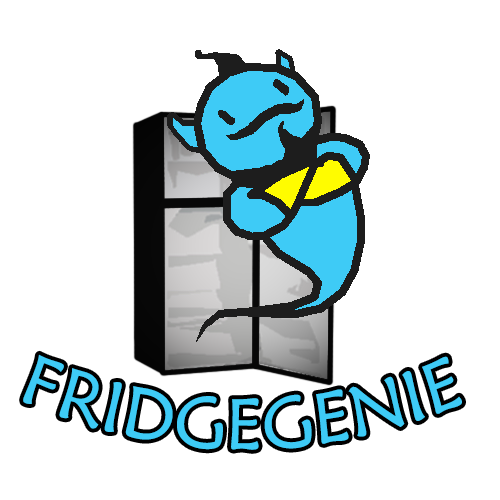
<style>
.page{position:relative;width:500px;height:500px;background:#ffffff}
.page>*{position:absolute;margin:0}
.t1{font:72px "MaiandraGD-Regular";color:#3ecbf6;scale:0.9 1}
</style>
<div class="page">
<p class="t1" style="left:23px;top:354px;width:439px;height:96px">FRIDGEGENIE</p>
</div>
